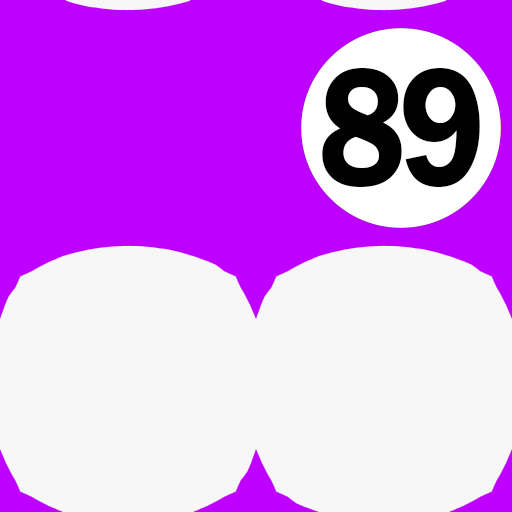
<style>
.page{position:relative;width:512px;height:512px;background:#f7f7f7}
.page>*{position:absolute;margin:0}
.t1{font:172.5px "FranklinGothic-Demi";letter-spacing:-0.05em;color:#010101;scale:0.87 1}
</style>
<div class="page">
<p class="t1" style="left:322px;top:68px;width:158px;height:119px">89</p>
</div>
